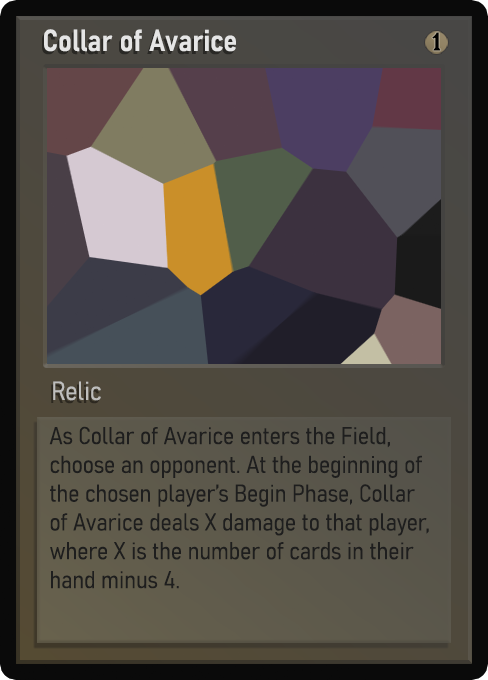
<style>
.page{position:relative;width:488px;height:680px}
.page>*{position:absolute;margin:0}
.t1{font:30px "Bahnschrift-SemiBoldSemiCondensed";color:#f2f2f2;font-weight:bold}
.t2{font:25px "WTRRoycroft";color:#000000;font-weight:bold;scale:1.09 1}
.t3{font:26px "Bahnschrift-LightSemiCondensed";color:#c8c8c8;font-weight:bold}
.t4{font:24px "Bahnschrift-LightSemiCondensed";color:#1e1e1e;font-weight:bold}
</style>
<div class="page">
<p class="t1" style="left:44px;top:29px;width:192px;height:23px;opacity:0.9">Collar of Avarice</p>
<p class="t2" style="left:432px;top:32px;width:9px;height:19px">1</p>
<p class="t3" style="left:53px;top:381px;width:48px;height:20px;opacity:0.9">Relic</p>
<p class="t4" style="left:49px;top:426px;width:380px;height:163px">As Collar of Avarice enters the Field, choose an opponent. At the beginning of the chosen player’s Begin Phase, Collar of Avarice deals X damage to that player, where X is the number of cards in their hand minus 4.</p>
</div>
